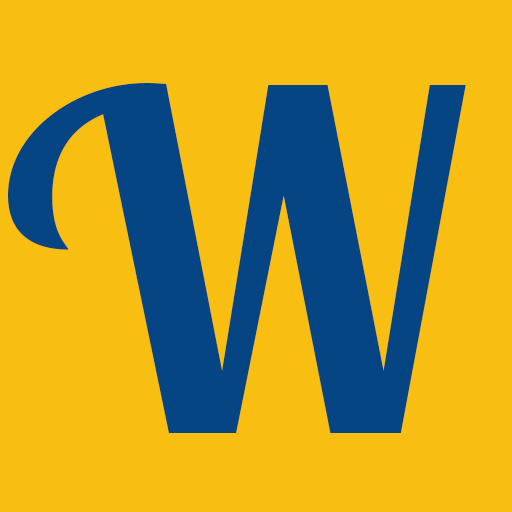
<style>
.page{position:relative;width:512px;height:512px;background:#f9be12}
.page>*{position:absolute;margin:0}
.t1{font:466.7px "LobsterTwo-Bold";color:#064583}
</style>
<div class="page">
<p class="t1" style="left:8px;top:83px;width:458px;height:350px">W</p>
</div>
